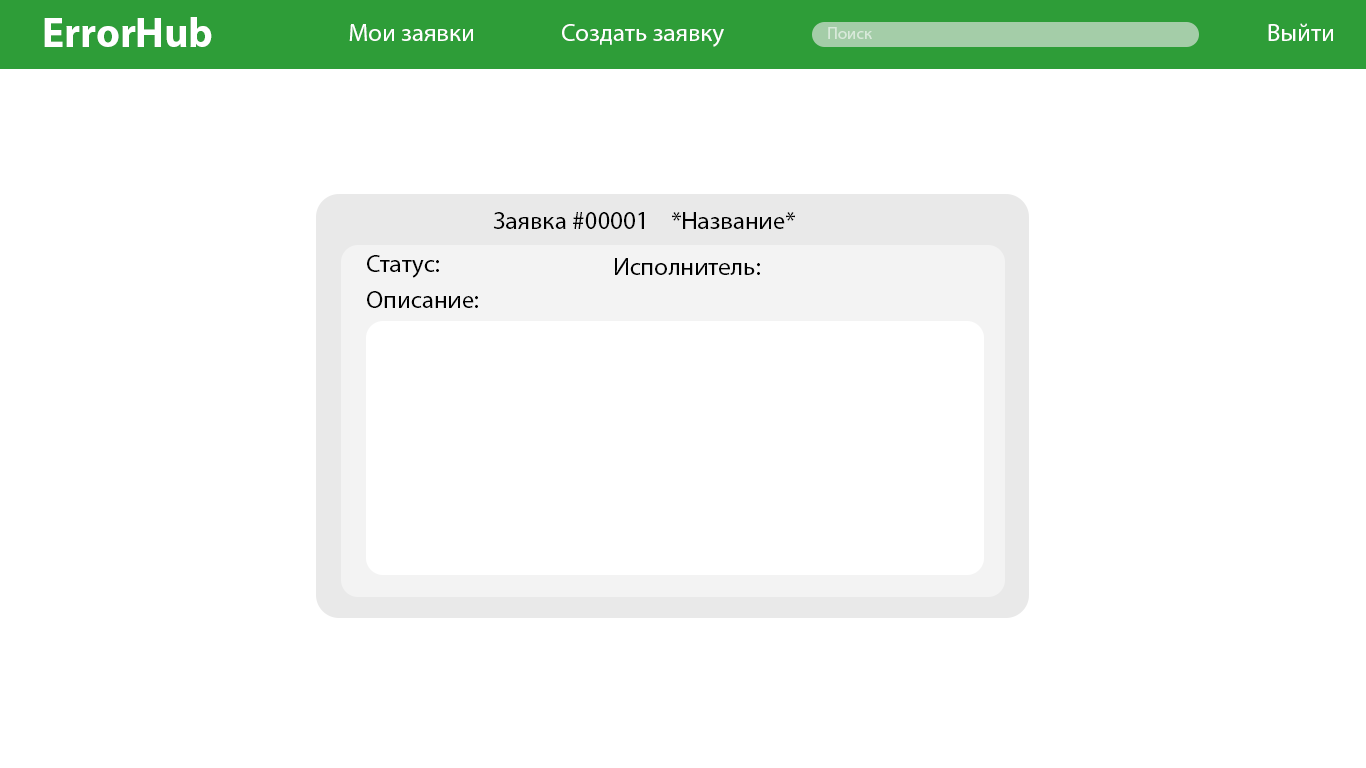
<style>
.page{position:relative;width:1366px;height:768px;background:#ffffff}
.page>*{position:absolute;margin:0}
.t1{font:41.7px "MyriadPro-Bold";color:#ffffff}
.t2{font:25px "MyriadPro-Regular";color:#ffffff}
.t3{font:16.7px "MyriadPro-Regular";color:#d8e9da}
.t4{font:25px "MyriadPro-Regular";color:#000000}
</style>
<div class="page">
<p class="t1" style="left:44px;top:17px;width:168px;height:30px">ErrorHub</p>
<p class="t2" style="left:349px;top:24px;width:124px;height:17px">Мои заявки</p>
<p class="t2" style="left:562px;top:24px;width:162px;height:23px">Создать заявку</p>
<p class="t3" style="left:828px;top:27px;width:44px;height:12px">Поиск</p>
<p class="t2" style="left:1268px;top:23px;width:65px;height:18px">Выйти</p>
<p class="t4" style="left:493px;top:212px;width:151px;height:17px">Заявка #00001</p>
<p class="t4" style="left:672px;top:212px;width:123px;height:17px">*Название*</p>
<p class="t4" style="left:367px;top:255px;width:72px;height:23px">Статус:</p>
<p class="t4" style="left:615px;top:258px;width:145px;height:17px">Исполнитель:</p>
<p class="t4" style="left:367px;top:291px;width:111px;height:17px">Описание:</p>
</div>
